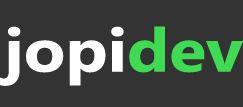
<style>
.page{position:relative;width:243px;height:107px;background:#333333}
.page>*{position:absolute;margin:0}
.t1{font:60.6px "Gadugi-Bold";color:#ffffff;scale:1.12 1}
.t2{font:60.6px "Gadugi-Bold";color:#3edb53;scale:1.12 1}
</style>
<div class="page">
<p class="t1" style="left:0px;top:26px;width:243px;height:60px">jopi<span class="t2">dev</span></p>
</div>
